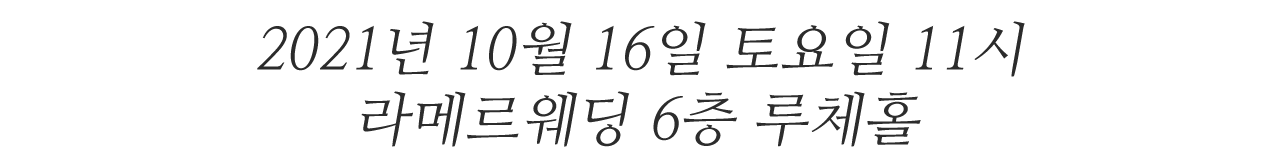
<style>
.page{position:relative;width:1280px;height:166px;background:#ffffff}
.page>*{position:absolute;margin:0}
.t1{font:58.3px "NanumMyeongjo";color:#2b2b2b;font-style:italic}
.t2{font:58.3px "NanumMyeongjo";color:#2c2c2c;font-style:italic}
</style>
<div class="page">
<p class="t1" style="left:257px;top:21px;width:768px;height:56px">2021년 10월 16일 토요일 11시</p>
<p class="t2" style="left:361px;top:91px;width:560px;height:56px">라메르웨딩 6층 루체홀</p>
</div>
